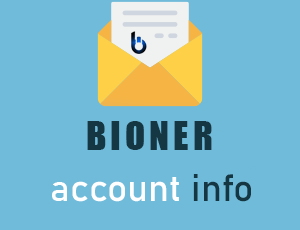
<style>
.page{position:relative;width:300px;height:230px;background:#70bbd9}
.page>*{position:absolute;margin:0}
.t1{font:37.4px "Impact";letter-spacing:0.1em;color:#153643}
.t2{font:37.4px "Bahnschrift";color:#ffffff}
.t3{font:37.4px "Bahnschrift";color:#153643}
</style>
<div class="page">
<p class="t1" style="left:87px;top:121px;width:125px;height:29px">BIONER</p>
<p class="t2" style="left:52px;top:174px;width:199px;height:28px">account <span class="t3">info</span></p>
</div>
